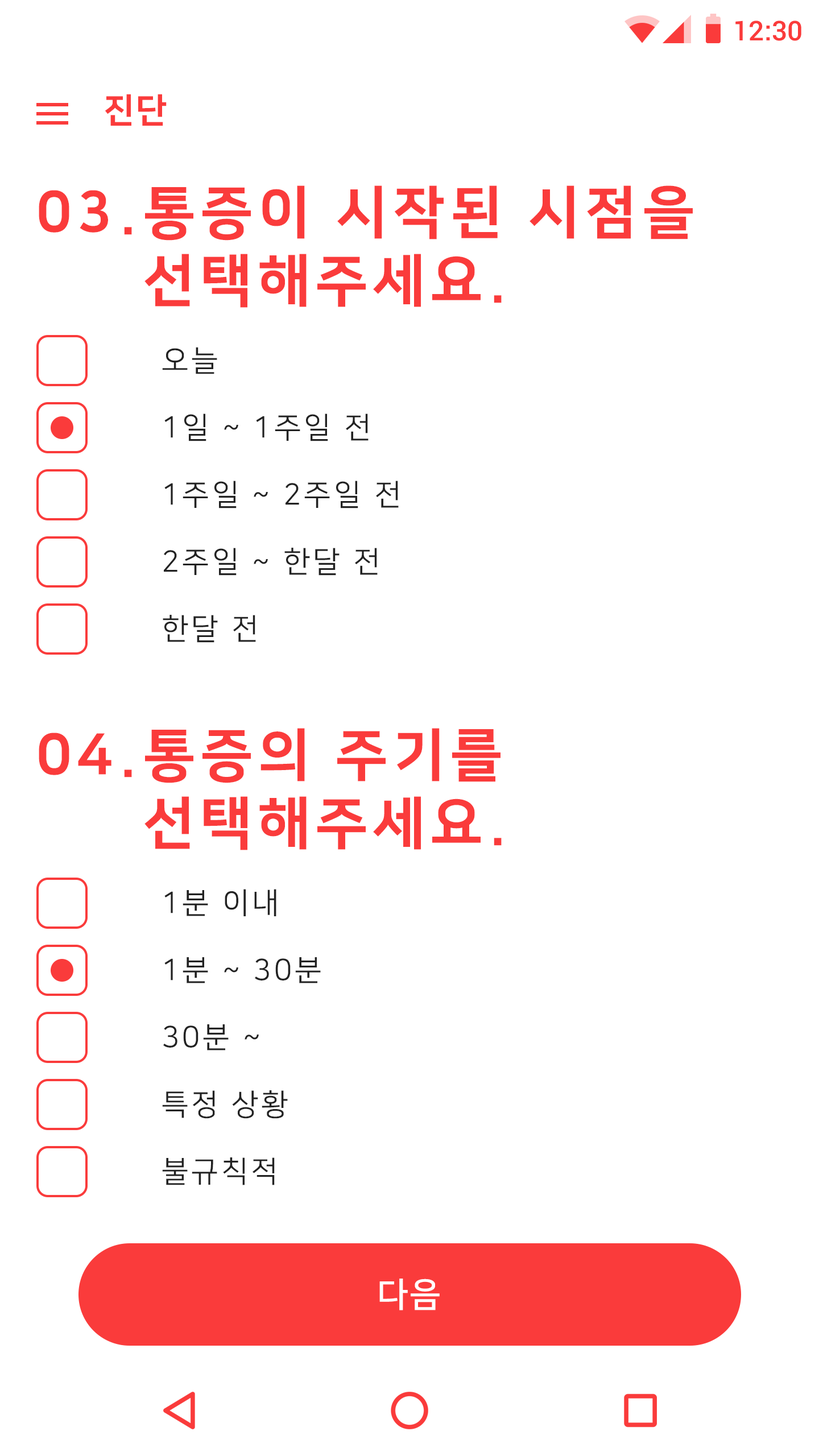
<style>
.page{position:relative;width:819px;height:1456px;background:#ffffff}
.page>*{position:absolute;margin:0}
.t1{font:27.3px "Roboto-Medium";color:#fa3b3b}
.t2{font:34.1px "NanumSquareEB";letter-spacing:0.05em;color:#fa3b3b}
.t3{font:56.9px "NanumSquareEB";letter-spacing:0.1em;color:#fa3b3b}
.t4{font:29.6px "NanumSquareR";letter-spacing:0.1em;color:#222222}
.t5{font:34.1px "NanumSquareB";letter-spacing:0.05em;color:#ffffff}
</style>
<div class="page">
<p class="t1" style="left:735px;top:20px;width:66px;height:21px">12:30</p>
<p class="t2" style="left:105px;top:94px;width:62px;height:32px">진단</p>
<p class="t3" style="left:144px;top:185px;width:549px;height:123px">통증이 시작된 시점을<br>선택해주세요.</p>
<p class="t3" style="left:39px;top:190px;width:93px;height:45px">03.</p>
<p class="t4" style="left:162px;top:347px;width:55px;height:27px">오늘</p>
<p class="t4" style="left:164px;top:413px;width:205px;height:28px">1일 ~ 1주일 전</p>
<p class="t4" style="left:164px;top:481px;width:235px;height:27px">1주일 ~ 2주일 전</p>
<p class="t4" style="left:164px;top:548px;width:214px;height:28px">2주일 ~ 한달 전</p>
<p class="t4" style="left:163px;top:615px;width:93px;height:28px">한달 전</p>
<p class="t3" style="left:39px;top:733px;width:93px;height:44px">04.</p>
<p class="t3" style="left:144px;top:728px;width:358px;height:122px">통증의 주기를<br>선택해주세요.</p>
<p class="t4" style="left:164px;top:889px;width:112px;height:27px">1분 이내</p>
<p class="t4" style="left:164px;top:957px;width:157px;height:26px">1분 ~ 30분</p>
<p class="t4" style="left:163px;top:1024px;width:96px;height:26px">30분 ~</p>
<p class="t4" style="left:162px;top:1090px;width:126px;height:29px">특정 상황</p>
<p class="t4" style="left:162px;top:1157px;width:113px;height:28px">불규칙적</p>
<p class="t5" style="left:379px;top:1279px;width:61px;height:31px">다음</p>
</div>
